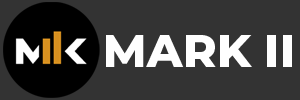
<style>
.page{position:relative;width:300px;height:100px;background:#333333}
.page>*{position:absolute;margin:0}
.t1{font:45.7px "Montserrat-ExtraBold";color:#ffffff}
</style>
<div class="page">
<p class="t1" style="left:106px;top:35px;width:186px;height:32px">MARK II</p>
</div>
